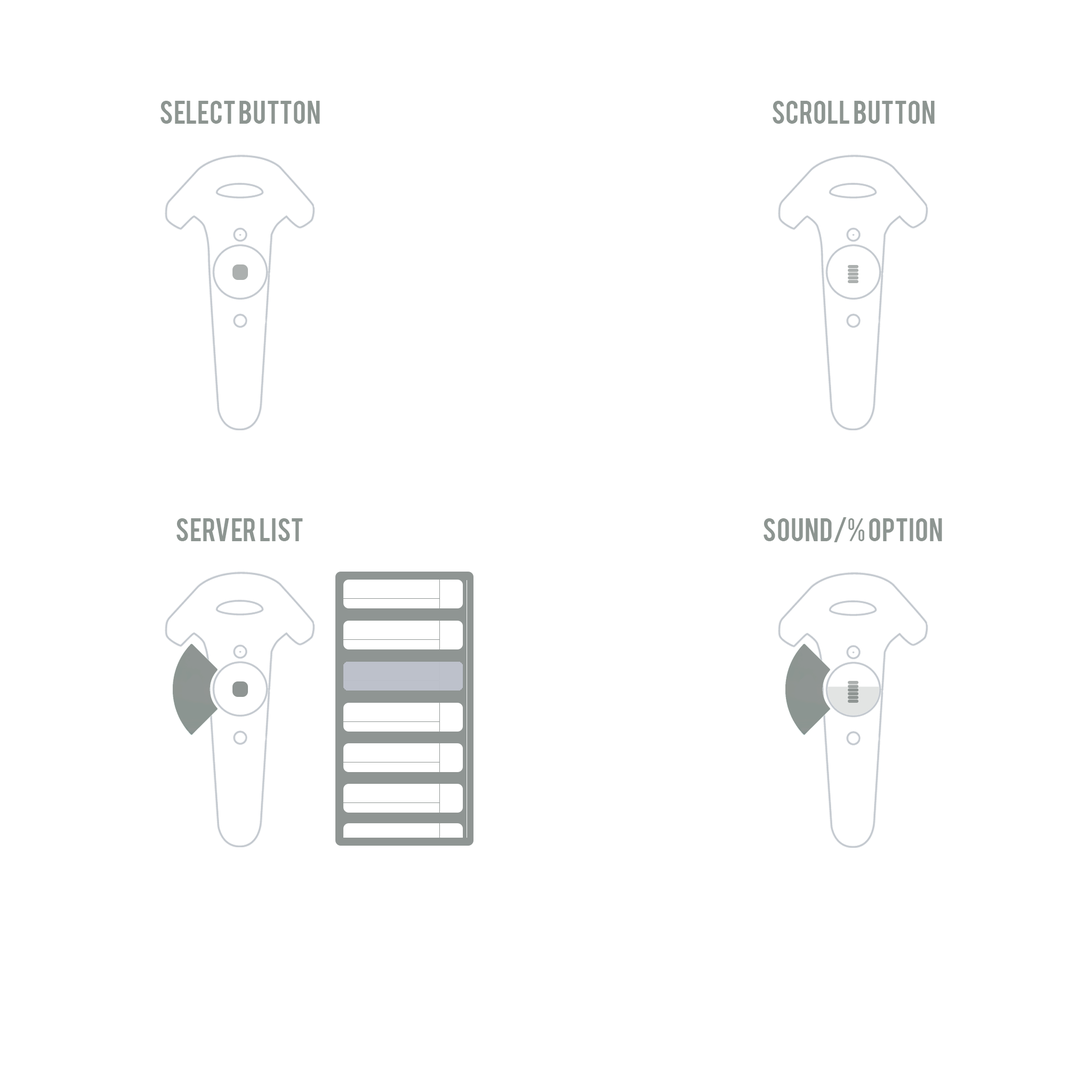
<style>
.page{position:relative;width:1092px;height:1092px;background:#ffffff}
.page>*{position:absolute;margin:0}
.t1{font:25.6px "Bebas";color:#8d9591}
</style>
<div class="page">
<p class="t1" style="left:160px;top:101px;width:160px;height:23px">SELECT BUTTON</p>
<p class="t1" style="left:773px;top:101px;width:162px;height:23px">SCROLL BUTTON</p>
<p class="t1" style="left:176px;top:518px;width:127px;height:23px">SERVER LIST</p>
<p class="t1" style="left:764px;top:517px;width:178px;height:25px">SOUND/% OPTION</p>
</div>
